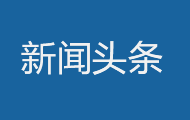
<style>
.page{position:relative;width:190px;height:120px;background:#18639e}
.page>*{position:absolute;margin:0}
.t1{font:35px "MicrosoftYaHei";letter-spacing:0.02em;color:#f1f1f1}
</style>
<div class="page">
<p class="t1" style="left:21px;top:40px;width:142px;height:35px">新闻头条</p>
</div>
